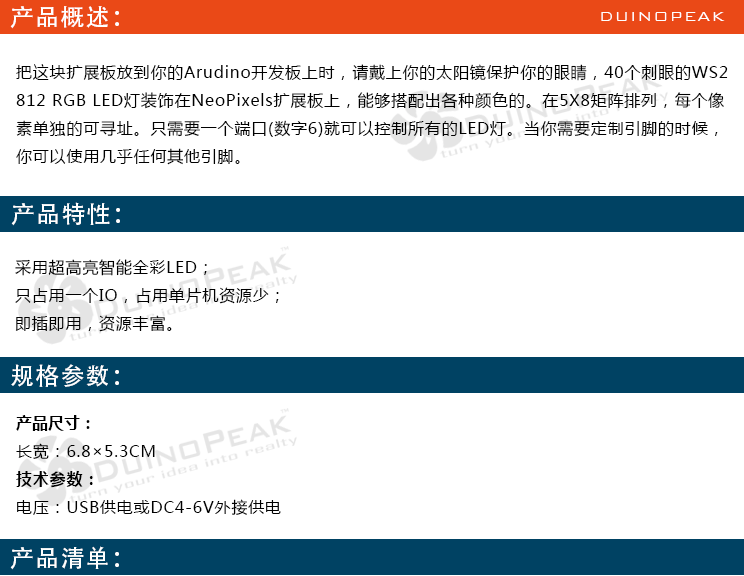
<style>
.page{position:relative;width:744px;height:576px;background:#ffffff}
.page>*{position:absolute;margin:0}
.t1{font:24px "AdobeHeitiStd-Regular";letter-spacing:0.05em;color:#ffffff}
.t2{font:18px "BankGothicBT-Light";letter-spacing:0.05em;color:#ffffff}
.t3{font:16px "MicrosoftYaHei";letter-spacing:0.05em;color:#000000}
.t4{font:16px "MicrosoftYaHei-Bold";color:#000000}
.t5{font:16px "MicrosoftYaHei-Bold";letter-spacing:0.05em;color:#000000}
</style>
<div class="page">
<p class="t1" style="left:10px;top:6px;width:109px;height:23px">产品概述：</p>
<p class="t2" style="left:601px;top:12px;width:124px;height:9px">DUINOPEAK</p>
<p class="t3" style="left:16px;top:64px;width:712px;height:101px">把这块扩展板放到你的Arudino开发板上时，请戴上你的太阳镜保护你的眼睛，40个刺眼的WS2<br>812 RGB LED灯装饰在NeoPixels扩展板上，能够搭配出各种颜色的。在5X8矩阵排列，每个像<br>素单独的可寻址。只需要一个端口(数字6)就可以控制所有的LED灯。当你需要定制引脚的时候，<br>你可以使用几乎任何其他引脚。</p>
<p class="t1" style="left:11px;top:202px;width:109px;height:24px">产品特性：</p>
<p class="t3" style="left:15px;top:259px;width:264px;height:73px">采用超高亮智能全彩LED；<br>只占用一个IO，占用单片机资源少；<br>即插即用，资源丰富。</p>
<p class="t1" style="left:11px;top:364px;width:108px;height:23px">规格参数：</p>
<p class="t3" style="left:16px;top:415px;width:265px;height:100px"><span class="t4">产品尺寸：<br></span>长宽：6.8×5.3CM<br><span class="t5">技术参数：<br></span>电压：USB供电或DC4-6V外接供电</p>
<p class="t1" style="left:10px;top:546px;width:109px;height:24px">产品清单：</p>
</div>
